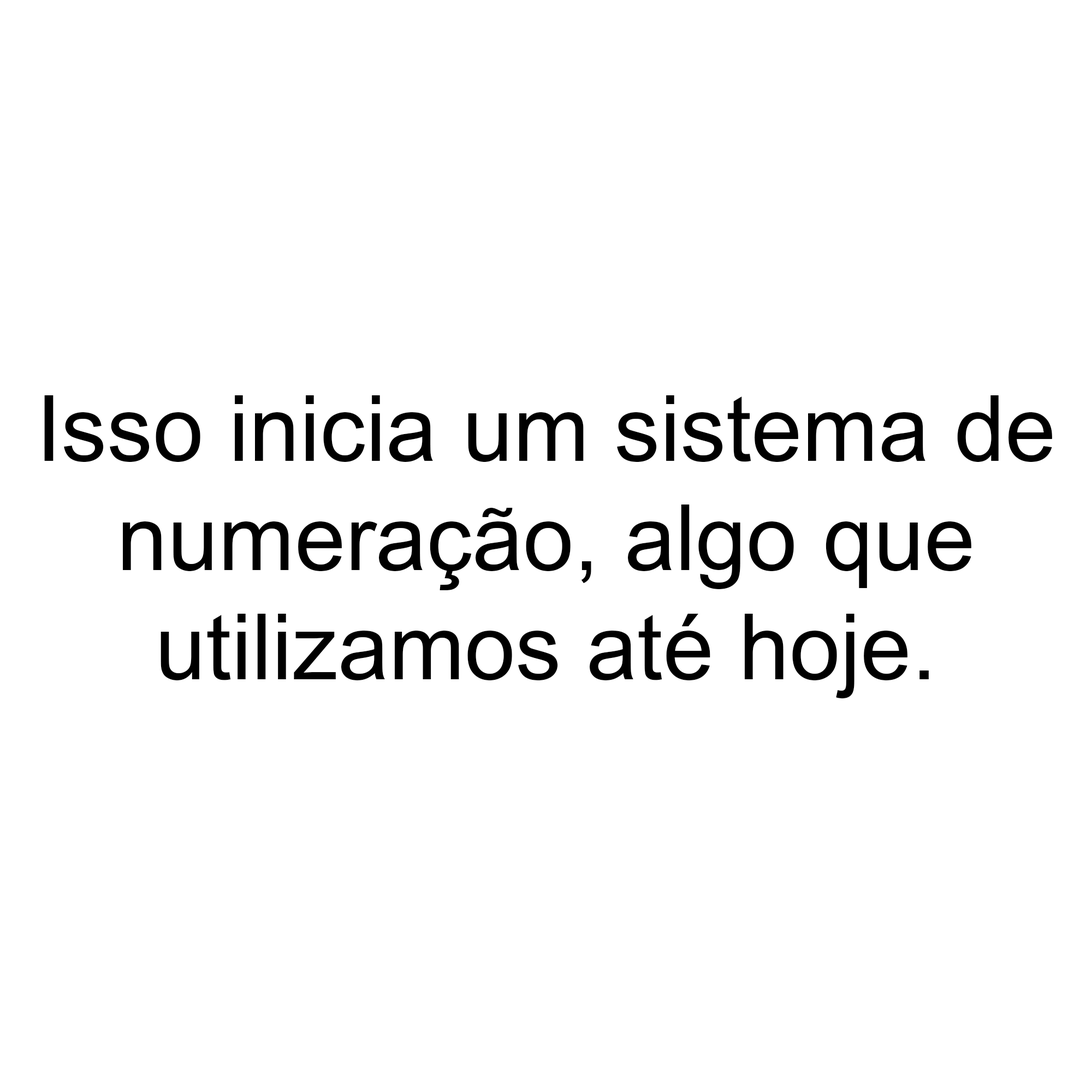
<style>
.page{position:relative;width:1092px;height:1092px;background:#ffffff}
.page>*{position:absolute;margin:0}
.t1{font:91px "ArialMT";color:#000000}
</style>
<div class="page">
<p class="t1" style="left:44px;top:395px;width:1008px;height:303px;text-align:center">Isso inicia um sistema de<br>numeração, algo que<br>utilizamos até hoje.</p>
</div>
